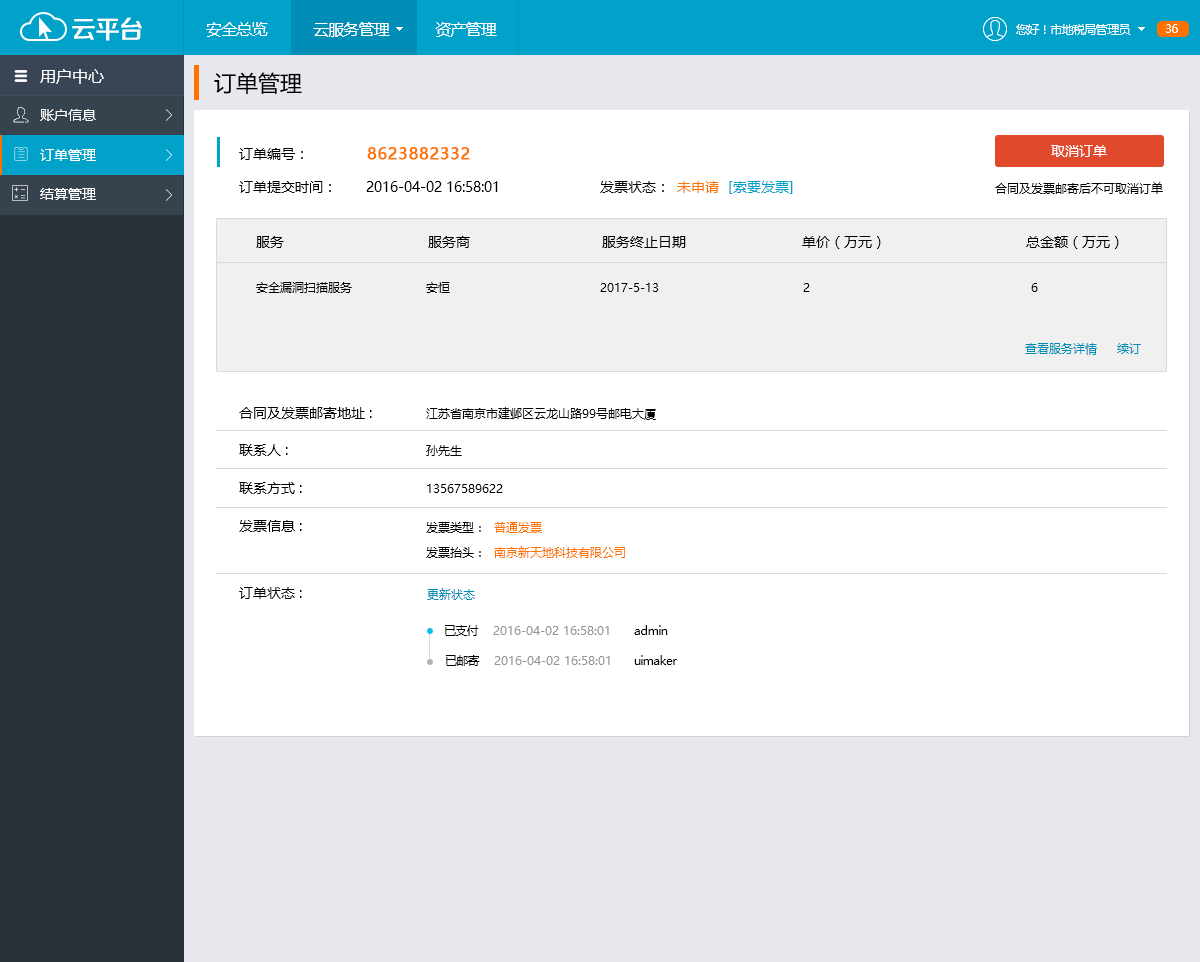
<style>
.page{position:relative;width:1200px;height:962px;background:#ffffff}
.page>*{position:absolute;margin:0}
.t1{font:25.4px "FZZZHONGJW--GB1-0";letter-spacing:-0.05em;color:#ffffff}
.t2{font:16px "MicrosoftYaHei";letter-spacing:-0.05em;color:#ffffff}
.t3{font:12px "MicrosoftYaHei";letter-spacing:-0.05em;color:#ffffff}
.t4{font:16px "MicrosoftYaHei";color:#ffffff}
.t5{font:22px "MicrosoftYaHei";color:#000000}
.t6{font:14px "MicrosoftYaHei";color:#ffffff}
.t7{font:14px "MicrosoftYaHei";color:#000000}
.t8{font:16px "MicrosoftYaHei";color:#ff7200;font-weight:bold}
.t9{font:14px "MicrosoftYaHei";color:#ff7200}
.t10{font:14px "MicrosoftYaHei";color:#00a2ca}
.t11{font:12px "MicrosoftYaHei";color:#000000}
.t12{font:12px "MicrosoftYaHei";color:#008eb7}
.t13{font:12px/25px "MicrosoftYaHei";color:#ff7200}
.t14{font:12px/25px "MicrosoftYaHei";color:#000000}
.t15{font:12px "MicrosoftYaHei";letter-spacing:-0.05em;color:#000000}
.t16{font:12px "MicrosoftYaHei";color:#969696}
</style>
<div class="page">
<p class="t1" style="left:72px;top:17px;width:70px;height:24px">云平台</p>
<p class="t2" style="left:206px;top:22px;width:291px;height:15px">安全总览           云服务管理           资产管理</p>
<p class="t3" style="left:1016px;top:24px;width:115px;height:11px">您好！市地税局管理员</p>
<p class="t3" style="left:1165px;top:24px;width:13px;height:9px">36</p>
<p class="t4" style="left:40px;top:69px;width:64px;height:15px">用户中心</p>
<p class="t5" style="left:214px;top:72px;width:88px;height:22px">订单管理</p>
<p class="t6" style="left:40px;top:109px;width:56px;height:12px">账户信息</p>
<p class="t6" style="left:40px;top:149px;width:56px;height:12px">订单管理</p>
<p class="t7" style="left:239px;top:148px;width:64px;height:12px">订单编号：</p>
<p class="t8" style="left:367px;top:147px;width:103px;height:13px">8623882332</p>
<p class="t6" style="left:1051px;top:145px;width:56px;height:12px">取消订单</p>
<p class="t7" style="left:239px;top:181px;width:92px;height:12px">订单提交时间：</p>
<p class="t7" style="left:366px;top:181px;width:132px;height:11px">2016-04-02 16:58:01</p>
<p class="t7" style="left:600px;top:181px;width:64px;height:12px">发票状态：</p>
<p class="t9" style="left:677px;top:181px;width:42px;height:12px">未申请</p>
<p class="t10" style="left:729px;top:181px;width:64px;height:13px">[索要发票]</p>
<p class="t11" style="left:995px;top:182px;width:168px;height:12px">合同及发票邮寄后不可取消订单</p>
<p class="t6" style="left:40px;top:188px;width:56px;height:12px">结算管理</p>
<p class="t7" style="left:256px;top:236px;width:863px;height:13px">服务                                    服务商                                 服务终止日期                             单价（万元）                                   总金额（万元）</p>
<p class="t11" style="left:256px;top:282px;width:96px;height:11px">安全漏洞扫描服务</p>
<p class="t11" style="left:426px;top:282px;width:24px;height:11px">安恒</p>
<p class="t11" style="left:600px;top:283px;width:59px;height:9px">2017-5-13</p>
<p class="t11" style="left:803px;top:283px;width:7px;height:9px">2</p>
<p class="t11" style="left:1031px;top:283px;width:7px;height:9px">6</p>
<p class="t12" style="left:1025px;top:343px;width:116px;height:12px">查看服务详情     续订</p>
<p class="t7" style="left:239px;top:407px;width:133px;height:12px">合同及发票邮寄地址 :</p>
<p class="t11" style="left:426px;top:407px;width:230px;height:13px">江苏省南京市建邺区云龙山路99号邮电大厦</p>
<p class="t7" style="left:239px;top:444px;width:49px;height:12px">联系人 :</p>
<p class="t11" style="left:426px;top:445px;width:36px;height:11px">孙先生</p>
<p class="t7" style="left:239px;top:482px;width:63px;height:12px">联系方式 :</p>
<p class="t11" style="left:427px;top:484px;width:76px;height:9px">13567589622</p>
<p class="t7" style="left:239px;top:520px;width:63px;height:12px">发票信息 :</p>
<p class="t13" style="left:426px;top:522px;width:199px;height:36px"><span class="t14">发票类型：  </span>普通发票<br><span class="t14">发票抬头：  </span>南京新天地科技有限公司</p>
<p class="t7" style="left:239px;top:587px;width:63px;height:12px">订单状态 :</p>
<p class="t12" style="left:427px;top:588px;width:48px;height:12px">更新状态</p>
<p class="t15" style="left:445px;top:625px;width:34px;height:11px">已支付</p>
<p class="t16" style="left:493px;top:626px;width:116px;height:9px">2016-04-02 16:58:01</p>
<p class="t15" style="left:634px;top:625px;width:34px;height:10px">admin</p>
<p class="t15" style="left:446px;top:655px;width:34px;height:11px">已邮寄</p>
<p class="t16" style="left:494px;top:656px;width:116px;height:9px">2016-04-02 16:58:01</p>
<p class="t15" style="left:634px;top:655px;width:43px;height:10px">uimaker</p>
</div>
